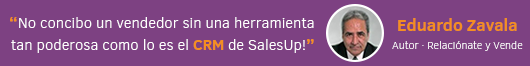
<style>
.page{position:relative;width:530px;height:66px;background:#7d4182}
.page>*{position:absolute;margin:0}
.t1{font:15px/22px "ClearSans-Light";color:#ffffff}
.t2{font:17px/22px "ClearSans-Bold";color:#f48e21}
.t3{font:15px/22px "ClearSans-Bold";color:#f48e21}
.t4{font:11px/18px "ClearSans-Thin";color:#ffffff}
.t5{font:17px/18px "ClearSans-Bold";color:#f48e21}
</style>
<div class="page">
<p class="t1" style="left:10px;top:17px;width:304px;height:36px;text-align:right"><span class="t2">“</span>No concibo un vendedor sin una herramienta  tan poderosa como lo es el <span class="t3">CRM </span>de SalesUp!<span class="t2">”</span></p>
<p class="t4" style="left:392px;top:18px;width:131px;height:33px;text-align:center"><span class="t5">Eduardo Zavala<br></span>Autor · Relaciónate y Vende</p>
</div>
